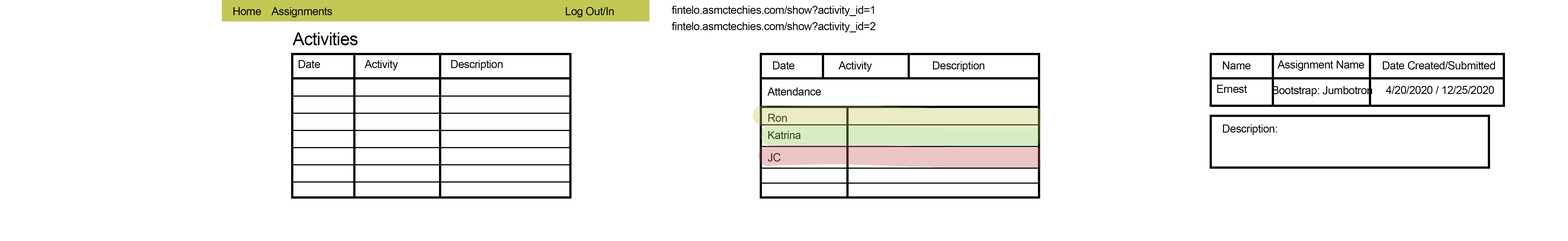
<style>
.page{position:relative;width:1568px;height:241px;background:#ffffff}
.page>*{position:absolute;margin:0}
.t1{font:11.1px "ArialMT";letter-spacing:-0.025em;color:#000000}
.t2{font:17.6px "ArialMT";letter-spacing:-0.025em;color:#000000}
.t3{font:11.1px "ArialMT";letter-spacing:-0.025em;color:#43441d}
.t4{font:11.1px "ArialMT";letter-spacing:-0.025em;color:#2e441d}
.t5{font:11.1px "ArialMT";letter-spacing:-0.025em;color:#441d1d}
</style>
<div class="page">
<p class="t1" style="left:672px;top:6px;width:202px;height:10px">fintelo.asmctechies.com/show?activity_id=1</p>
<p class="t1" style="left:233px;top:7px;width:28px;height:8px">Home</p>
<p class="t1" style="left:272px;top:7px;width:60px;height:10px">Assignments</p>
<p class="t1" style="left:566px;top:7px;width:48px;height:10px">Log Out/In</p>
<p class="t1" style="left:672px;top:22px;width:204px;height:10px">fintelo.asmctechies.com/show?activity_id=2</p>
<p class="t2" style="left:292px;top:32px;width:66px;height:13px">Activities</p>
<p class="t1" style="left:298px;top:60px;width:22px;height:8px">Date</p>
<p class="t1" style="left:365px;top:60px;width:33px;height:10px">Activity</p>
<p class="t1" style="left:451px;top:60px;width:52px;height:10px">Description</p>
<p class="t1" style="left:773px;top:61px;width:21px;height:8px">Date</p>
<p class="t1" style="left:839px;top:61px;width:33px;height:10px">Activity</p>
<p class="t1" style="left:933px;top:61px;width:51px;height:10px">Description</p>
<p class="t1" style="left:1223px;top:61px;width:28px;height:8px">Name</p>
<p class="t1" style="left:1278px;top:60px;width:86px;height:11px">Assignment Name</p>
<p class="t1" style="left:1383px;top:61px;width:112px;height:8px">Date Created/Submitted</p>
<p class="t1" style="left:768px;top:87px;width:53px;height:8px">Attendance</p>
<p class="t1" style="left:1217px;top:85px;width:30px;height:8px">Ernest</p>
<p class="t1" style="left:1272px;top:86px;width:100px;height:10px">Bootstrap: Jumbotron</p>
<p class="t1" style="left:1386px;top:86px;width:108px;height:8px">4/20/2020 / 12/25/2020</p>
<p class="t3" style="left:768px;top:114px;width:19px;height:8px">Ron</p>
<p class="t1" style="left:1223px;top:124px;width:54px;height:11px">Description:</p>
<p class="t4" style="left:768px;top:131px;width:33px;height:8px">Katrina</p>
<p class="t5" style="left:768px;top:153px;width:13px;height:8px">JC</p>
</div>
